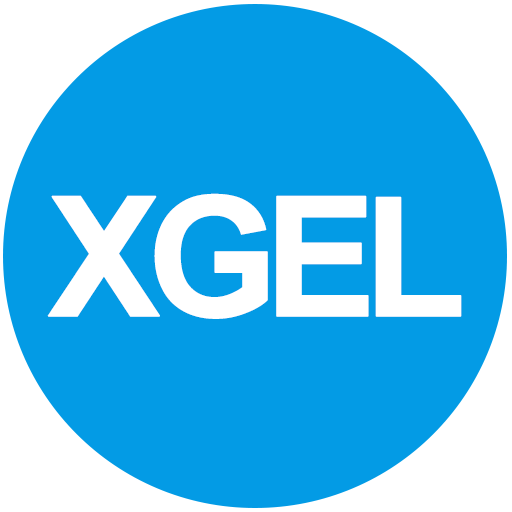
<style>
.page{position:relative;width:512px;height:512px;background:#039be5}
.page>*{position:absolute;margin:0}
.t1{font:166.7px "Arial-BoldMT";letter-spacing:-0.1em;color:#ffffff;font-weight:bold}
</style>
<div class="page">
<p class="t1" style="left:47px;top:193px;width:415px;height:126px">XGEL</p>
</div>
